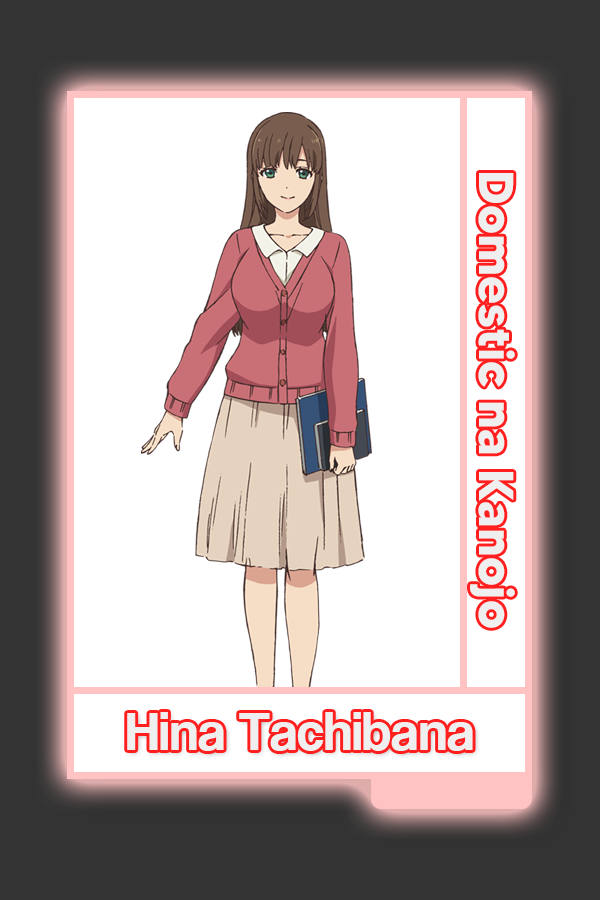
<style>
.page{position:relative;width:600px;height:900px;background:#ffffff}
.page>*{position:absolute;margin:0}
.t1{font:48.8px "MADETOMMY-Bold";color:#f0efef}
.t2{font:56.3px "CoolveticaRg-Regular";color:#f0efef}
</style>
<div class="page">
<p class="t1" style="left:470px;top:173px;width:45px;height:455px;rotate:90deg">Domestic na Kanojo</p>
<p class="t2" style="left:127px;top:712px;width:346px;height:39px">Hina Tachibana</p>
</div>
